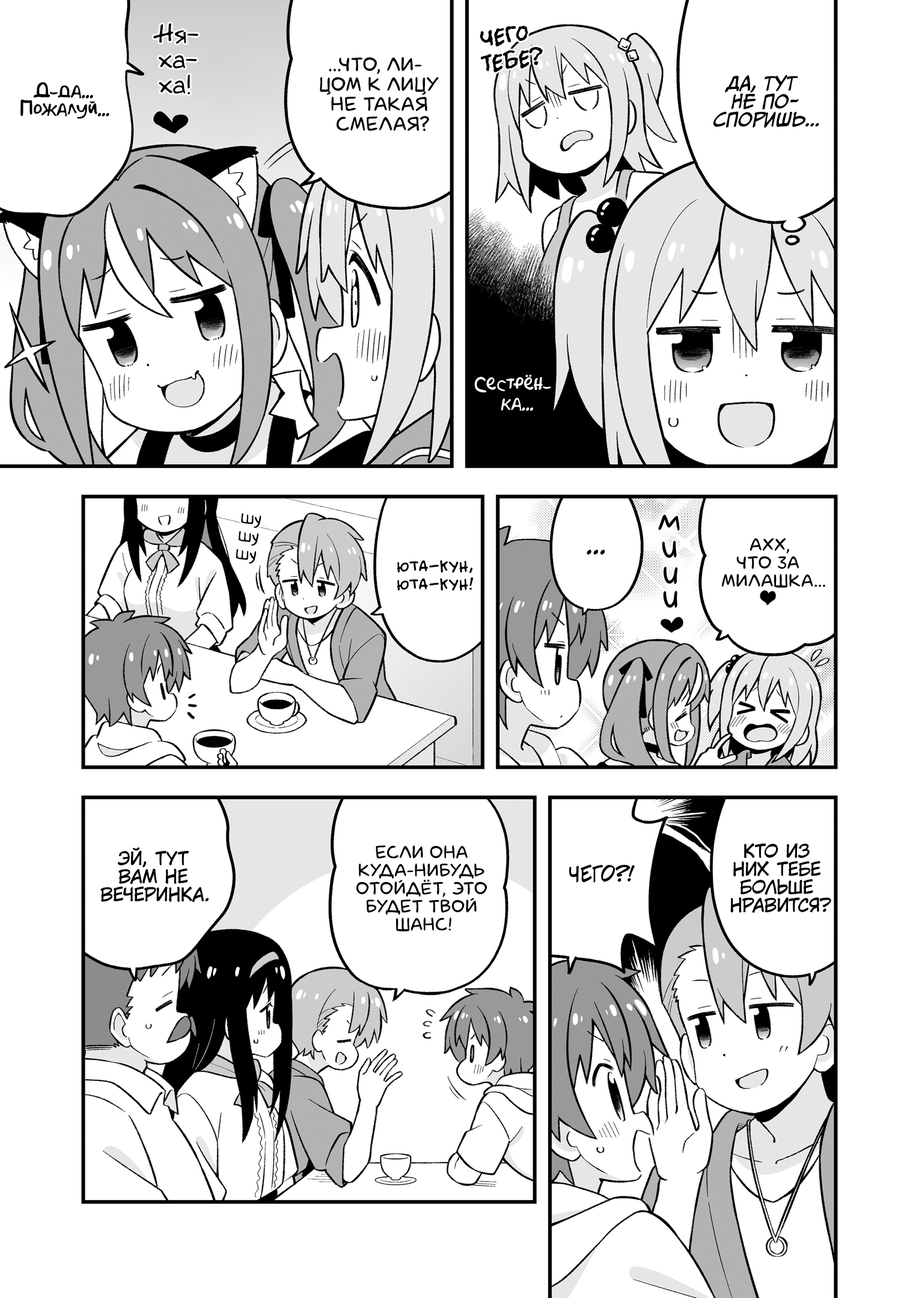
<style>
.page{position:relative;width:919px;height:1298px;background:#ffffff}
.page>*{position:absolute;margin:0}
.t1{font:25.2px "v_Augie";color:#000000}
.t2{font:25.2px "el_CCEvilSchemes";color:#000000;text-transform:uppercase}
.t3{font:19.8px "laCartoonerie";color:#000000;text-transform:uppercase}
.t4{font:18px "CCMeanwhile";color:#000000;text-transform:uppercase;font-style:italic}
.t5{font:18px "AkbarPlain";color:#000000}
.t6{font:18px "AkbarPlain";color:#ffffff}
.t7{font:18px "v_Augie";color:#000000}
.t8{font:32.4px "laCartoonerie";color:#000000}
.t9{font:18px "laCartoonerie";color:#000000;text-transform:uppercase}
.t10{font:18px "KuraiVoice2";color:#000000;text-transform:uppercase}
.t11{font:25.2px "KuraiVoice2";color:#000000;text-transform:uppercase}
.t12{font:18px "v_BillyTheFlyingRobotBBLC";color:#000000;text-transform:uppercase}
.t13{font:19.8px "v_CCJeffCampbell";color:#000000;text-transform:uppercase}
</style>
<div class="page">
<p class="t1" style="left:153px;top:23px;width:45px;height:71px;text-align:center;rotate:2deg">Ня-<br>ха-<br>ха!</p>
<p class="t2" style="left:480px;top:25px;width:63px;height:48px;text-align:center;rotate:-8deg">Чего<br>тебе?</p>
<p class="t3" style="left:320px;top:57px;width:119px;height:74px;text-align:center">...Что, ли-<br>цом к лицу<br>не такая<br>смелая?</p>
<p class="t4" style="left:713px;top:75px;width:106px;height:53px;text-align:center">Да, тут<br>не по-<br>споришь...</p>
<p class="t5" style="left:20px;top:82px;width:89px;height:37px;text-align:center">Д-да...<br>Пожалуй...</p>
<p class="t6" style="left:474px;top:374px;width:78px;height:37px;text-align:center">Сестрён-<br>ка...</p>
<p class="t7" style="left:236px;top:513px;width:25px;height:51px;text-align:center;rotate:8deg">шу<br>шу<br>шу</p>
<p class="t8" style="left:658px;top:514px;width:22px;height:17px;rotate:1deg">м</p>
<p class="t8" style="left:662px;top:541px;width:15px;height:17px;rotate:-1deg">и</p>
<p class="t9" style="left:722px;top:538px;width:103px;height:67px;text-align:center">Ахх,<br>что за<br>милашка...<br><span class="t10">♥</span></p>
<p class="t11" style="left:586px;top:549px;width:19px;height:6px">...</p>
<p class="t12" style="left:397px;top:560px;width:76px;height:31px;text-align:center">Юта-кун,<br>Юта-кун!</p>
<p class="t8" style="left:663px;top:567px;width:15px;height:17px;rotate:5deg">и</p>
<p class="t8" style="left:663px;top:591px;width:14px;height:17px;rotate:2deg">и</p>
<p class="t9" style="left:356px;top:845px;width:131px;height:86px;text-align:center">Если она<br>куда-нибудь<br>отойдёт, это<br>будет твой<br>шанс!</p>
<p class="t10" style="left:730px;top:843px;width:101px;height:70px;text-align:center">Кто из<br>них тебе<br>больше<br>нравится?</p>
<p class="t10" style="left:100px;top:847px;width:109px;height:55px;text-align:center">Эй, тут<br>вам не<br>вечеринка.</p>
<p class="t13" style="left:569px;top:865px;width:66px;height:18px">Чего?!</p>
</div>
